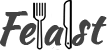
<style>
.page{position:relative;width:107px;height:50px;background:#ffffff}
.page>*{position:absolute;margin:0}
.t1{font:42.3px "KaushanScript-Regular";letter-spacing:-0.05em;color:#424242;font-weight:bold}
</style>
<div class="page">
<p class="t1" style="left:0px;top:11px;width:28px;height:36px">F</p>
<p class="t1" style="left:91px;top:16px;width:16px;height:29px">t</p>
<p class="t1" style="left:19px;top:23px;width:18px;height:22px">e</p>
<p class="t1" style="left:44px;top:25px;width:20px;height:21px">a</p>
<p class="t1" style="left:71px;top:19px;width:20px;height:27px">s</p>
</div>
